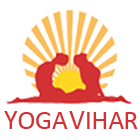
<style>
.page{position:relative;width:140px;height:140px;background:#ffffff}
.page>*{position:absolute;margin:0}
.t1{font:26.6px "Calibri";color:#d53033}
.t2{font:28px "Calibri";color:#d53033}
</style>
<div class="page">
<p class="t1" style="left:4px;top:111px;width:134px;height:18px"><span class="t2">Y</span>OGA <span class="t2">V</span>IHAR</p>
</div>
